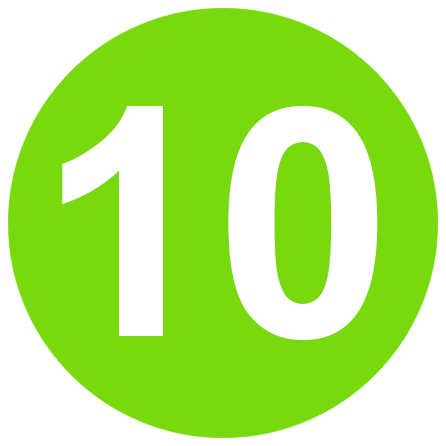
<style>
.page{position:relative;width:446px;height:446px;background:#79d90f}
.page>*{position:absolute;margin:0}
.t1{font:319.9px "Arial-BoldMT";color:#ffffff}
</style>
<div class="page">
<p class="t1" style="left:62px;top:106px;width:316px;height:234px">10</p>
</div>
